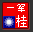
<style>
.page{position:relative;width:33px;height:32px;background:#f20000}
.page>*{position:absolute;margin:0}
.t1{font:10.4px "SimSun";color:#ffffff}
.t2{font:11.7px "SimSun";color:#ffffff}
</style>
<div class="page">
<p class="t1" style="left:7px;top:4px;width:18px;height:8px">一军</p>
<p class="t2" style="left:16px;top:15px;width:11px;height:12px">桂</p>
</div>
